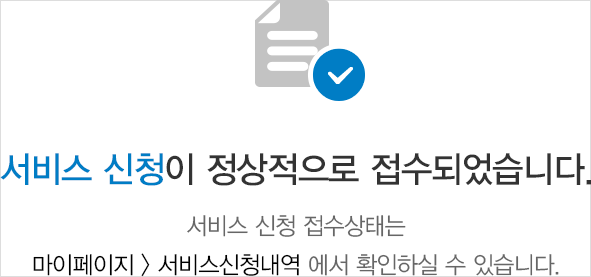
<style>
.page{position:relative;width:591px;height:277px;background:#ffffff}
.page>*{position:absolute;margin:0}
.t1{font:36px "YDVYGO33";letter-spacing:-0.025em;color:#333333;scale:0.95 1}
.t2{font:36px "YDVYGO33";letter-spacing:-0.025em;color:#007dc5;scale:0.95 1}
.t3{font:24px/39px "YDVYGO32";letter-spacing:-0.025em;color:#000000;scale:0.95 1}
.t4{font:24px "YDVYGO32";letter-spacing:-0.025em;color:#666666;scale:0.95 1}
.t5{font:24px/39px "YDVYGO32";letter-spacing:-0.025em;color:#666666;scale:0.95 1}
</style>
<div class="page">
<p class="t1" style="left:0px;top:153px;width:591px;height:33px"><span class="t2">서비스 신청</span>이 정상적으로 접수되었습니다.</p>
<p class="t3" style="left:33px;top:215px;width:526px;height:62px;text-align:center"><span class="t4">서비스 신청 접수상태는<br></span>마이페이지 &gt; 서비스신청내역<span class="t5"> 에서 확인하실 수 있습니다.</span></p>
</div>
